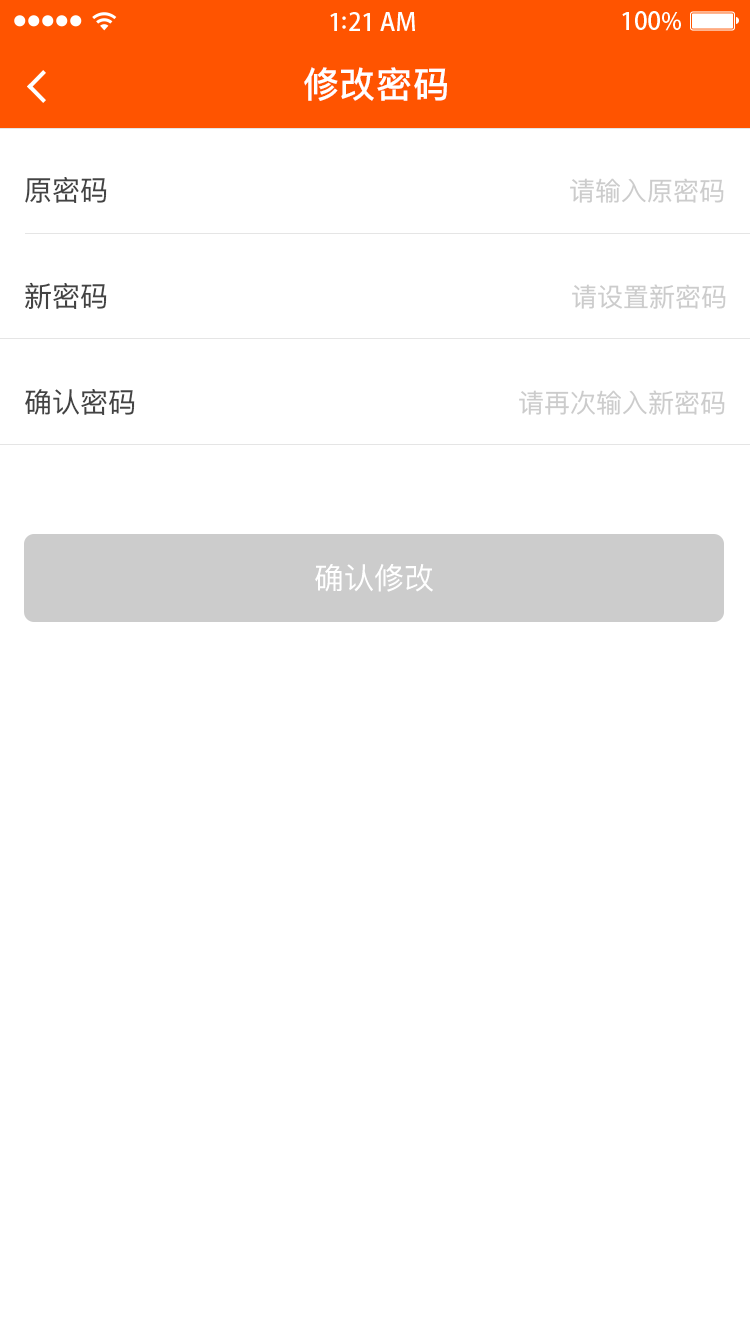
<style>
.page{position:relative;width:750px;height:1334px;background:#ffffff}
.page>*{position:absolute;margin:0}
.t1{font:36px "PingFangSC-Medium";letter-spacing:0.02em;color:#ffffff}
.t2{font:28px "PingFangSC-Regular";color:#434343}
.t3{font:26px "PingFangSC-Regular";color:#cccccc}
.t4{font:30px "PingFangSC-Regular";color:#ffffff;text-transform:uppercase}
</style>
<div class="page">
<p class="t1" style="left:304px;top:67px;width:143px;height:34px">修改密码</p>
<p class="t2" style="left:25px;top:177px;width:82px;height:26px">原密码</p>
<p class="t3" style="left:570px;top:178px;width:154px;height:25px">请输入原密码</p>
<p class="t2" style="left:25px;top:282px;width:82px;height:27px">新密码</p>
<p class="t3" style="left:572px;top:284px;width:154px;height:25px">请设置新密码</p>
<p class="t2" style="left:25px;top:389px;width:110px;height:26px">确认密码</p>
<p class="t3" style="left:519px;top:390px;width:206px;height:25px">请再次输入新密码</p>
<p class="t4" style="left:315px;top:564px;width:118px;height:28px">确认修改</p>
</div>
